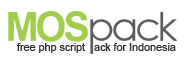
<style>
.page{position:relative;width:188px;height:61px;background:#ffffff}
.page>*{position:absolute;margin:0}
.t1{font:11px "ArialMT";letter-spacing:-0.01em;color:#2e2e2e}
</style>
<div class="page">
<p class="t1" style="left:17px;top:43px;width:159px;height:10px">free php script   ack for Indonesia</p>
</div>
